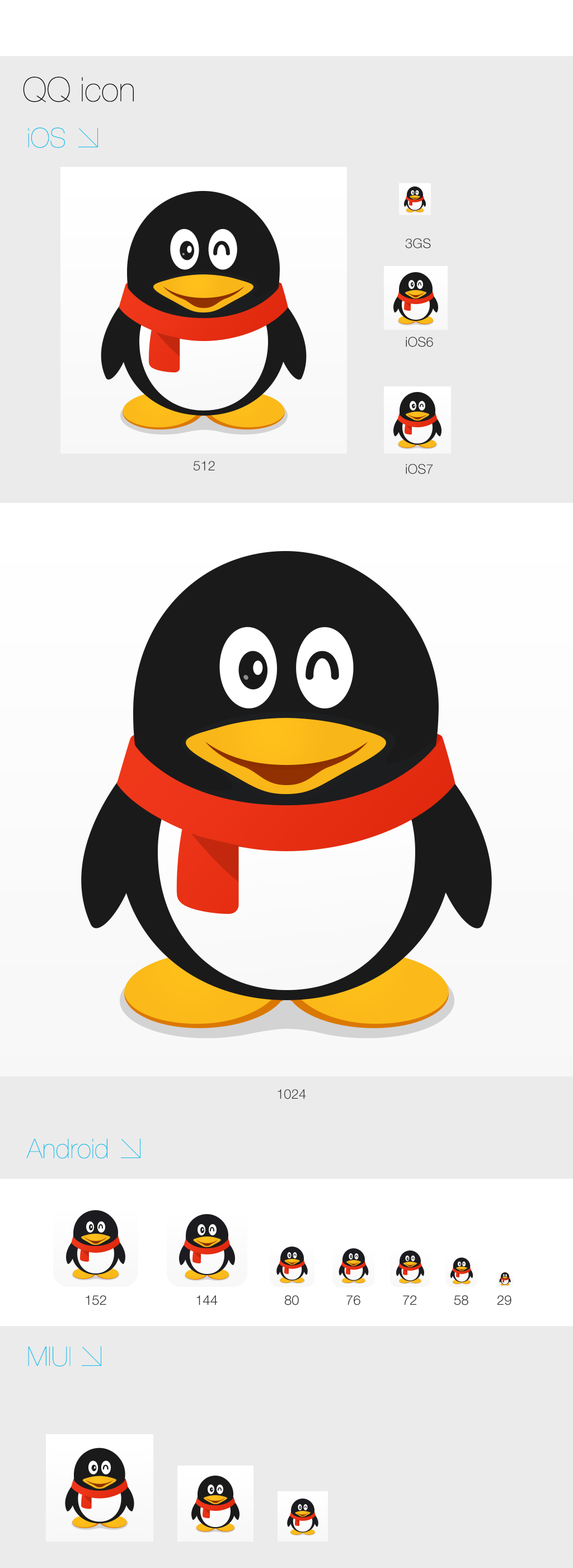
<style>
.page{position:relative;width:573px;height:1568px;background:#ebebeb}
.page>*{position:absolute;margin:0}
.t1{font:33.6px "HelveticaNeue-UltraLight";color:#000000}
.t2{font:26.9px "HelveticaNeue-UltraLight";color:#09bce9}
.t3{font:13.4px "HelveticaNeue-Light";color:#333333}
</style>
<div class="page">
<p class="t1" style="left:23px;top:77px;width:111px;height:25px">QQ icon</p>
<p class="t2" style="left:28px;top:127px;width:37px;height:21px">iOS</p>
<p class="t3" style="left:405px;top:238px;width:26px;height:11px">3GS</p>
<p class="t3" style="left:406px;top:337px;width:27px;height:10px">iOS6</p>
<p class="t3" style="left:193px;top:461px;width:22px;height:10px">512</p>
<p class="t3" style="left:406px;top:464px;width:27px;height:10px">iOS7</p>
<p class="t3" style="left:278px;top:1089px;width:28px;height:10px">1024</p>
<p class="t2" style="left:26px;top:1138px;width:82px;height:21px">Android</p>
<p class="t3" style="left:86px;top:1295px;width:20px;height:10px">152</p>
<p class="t3" style="left:197px;top:1295px;width:21px;height:10px">144</p>
<p class="t3" style="left:285px;top:1295px;width:14px;height:10px">80</p>
<p class="t3" style="left:347px;top:1295px;width:14px;height:10px">76</p>
<p class="t3" style="left:403px;top:1295px;width:14px;height:10px">72</p>
<p class="t3" style="left:454px;top:1295px;width:15px;height:10px">58</p>
<p class="t3" style="left:497px;top:1295px;width:15px;height:10px">29</p>
<p class="t2" style="left:28px;top:1346px;width:43px;height:20px">MIUI</p>
</div>
